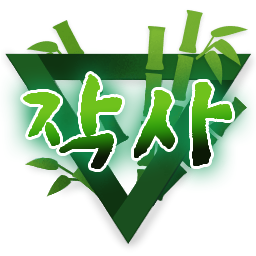
<style>
.page{position:relative;width:256px;height:256px;background:#ffffff}
.page>*{position:absolute;margin:0}
.t1{font:120.8px "SangSangRockOTF";letter-spacing:0.1em;scale:0.93 1}
.t2{font:114.8px "SangSangRockOTF";letter-spacing:0.12em;scale:0.93 1}
</style>
<div class="page">
<p class="t1" style="left:24px;top:75px;width:207px;height:93px">작<span class="t2">사</span></p>
</div>
